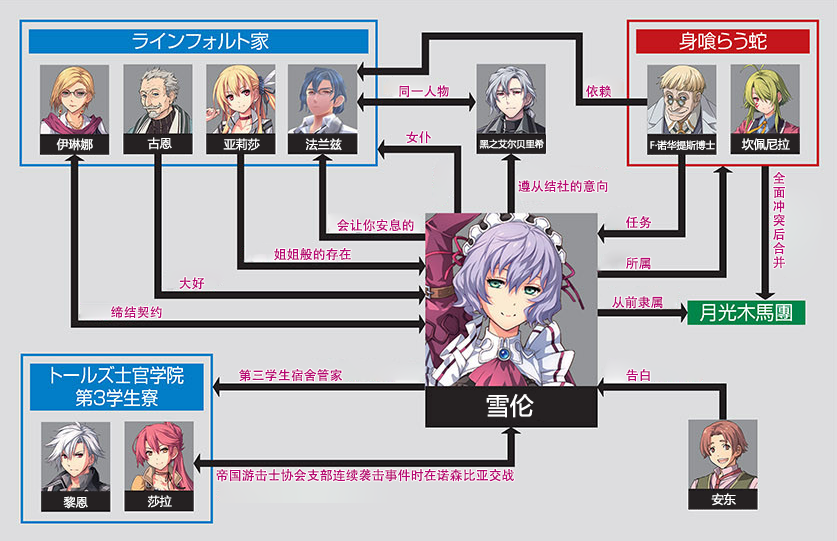
<style>
.page{position:relative;width:837px;height:541px;background:#dddddf}
.page>*{position:absolute;margin:0}
.t1{font:13px "AdobeHeitiStd-Regular";color:#b70773}
.t2{font:12px "MicrosoftYaHei";color:#ffffff}
.t3{font:9.2px "MicrosoftYaHei";color:#ffffff}
.t4{font:9.7px "MicrosoftYaHei";color:#ffffff}
.t5{font:13px/14px "AdobeHeitiStd-Regular";color:#b70773}
.t6{font:24px "MicrosoftYaHei";color:#ffffff}
</style>
<div class="page">
<p class="t1" style="left:399px;top:85px;width:50px;height:13px">同一人物</p>
<p class="t1" style="left:585px;top:85px;width:27px;height:13px">依赖</p>
<p class="t2" style="left:147px;top:137px;width:25px;height:13px">古恩</p>
<p class="t1" style="left:406px;top:131px;width:25px;height:13px">女仆</p>
<p class="t2" style="left:56px;top:138px;width:37px;height:13px">伊琳娜</p>
<p class="t2" style="left:223px;top:138px;width:37px;height:13px">亚莉莎</p>
<p class="t2" style="left:305px;top:138px;width:37px;height:13px">法兰兹</p>
<p class="t3" style="left:479px;top:139px;width:65px;height:10px">黑之艾尔贝里希</p>
<p class="t4" style="left:650px;top:140px;width:65px;height:10px">F·诺华提斯博士</p>
<p class="t2" style="left:741px;top:138px;width:49px;height:13px">坎佩尼拉</p>
<p class="t5" style="left:773px;top:172px;width:13px;height:97px">全面冲突后<br>合并</p>
<p class="t1" style="left:518px;top:180px;width:90px;height:13px">遵从结社的意向</p>
<p class="t1" style="left:337px;top:219px;width:77px;height:13px">会让你安息的</p>
<p class="t1" style="left:625px;top:216px;width:27px;height:13px">任务</p>
<p class="t1" style="left:274px;top:248px;width:77px;height:13px">姐姐般的存在</p>
<p class="t1" style="left:626px;top:257px;width:25px;height:13px">所属</p>
<p class="t1" style="left:179px;top:277px;width:26px;height:13px">大好</p>
<p class="t1" style="left:612px;top:296px;width:51px;height:13px">从前隶属</p>
<p class="t1" style="left:111px;top:306px;width:51px;height:13px">缔结契约</p>
<p class="t1" style="left:239px;top:369px;width:103px;height:13px">第三学生宿舍管家</p>
<p class="t1" style="left:626px;top:369px;width:24px;height:13px">告白</p>
<p class="t6" style="left:486px;top:394px;width:48px;height:24px">雪伦</p>
<p class="t1" style="left:216px;top:469px;width:298px;height:13px">帝国游击士协会支部连续袭击事件时在诺森比亚交战</p>
<p class="t2" style="left:63px;top:496px;width:25px;height:13px">黎恩</p>
<p class="t2" style="left:147px;top:495px;width:25px;height:13px">莎拉</p>
<p class="t2" style="left:711px;top:493px;width:25px;height:13px">安东</p>
</div>
